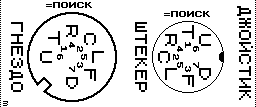
<style>
.page{position:relative;width:256px;height:107px;background:#ffffff}
.page>*{position:absolute;margin:0}
.t1{font:16px "ZX 6x8";color:#000000}
.t2{font:32px "zxSpectrumStrict";color:#000000}
</style>
<div class="page">
<p class="t1" style="left:237px;top:6px;width:16px;height:94px;rotate:90deg">ДЖОЙСТИК</p>
<p class="t1" style="left:9px;top:22px;width:14px;height:70px;rotate:90deg">ГНЕЗДО</p>
<p class="t2" style="left:66px;top:25px;width:12px;height:12px;rotate:90deg">R</p>
<p class="t1" style="left:135px;top:22px;width:12px;height:70px;rotate:90deg">ШТЕКЕР</p>
<p class="t2" style="left:182px;top:25px;width:12px;height:14px;rotate:90deg">T</p>
<p class="t2" style="left:48px;top:31px;width:12px;height:14px;rotate:90deg">T</p>
<p class="t2" style="left:84px;top:33px;width:12px;height:12px;rotate:90deg">C</p>
<p class="t2" style="left:165px;top:34px;width:12px;height:12px;rotate:90deg">R</p>
<p class="t2" style="left:199px;top:34px;width:12px;height:12px;rotate:90deg">U</p>
<p class="t2" style="left:40px;top:51px;width:12px;height:12px;rotate:90deg">U</p>
<p class="t2" style="left:92px;top:51px;width:12px;height:12px;rotate:90deg">L</p>
<p class="t2" style="left:158px;top:51px;width:12px;height:12px;rotate:90deg">C</p>
<p class="t2" style="left:66px;top:77px;width:12px;height:12px;rotate:90deg">D</p>
<p class="t2" style="left:84px;top:69px;width:12px;height:12px;rotate:90deg">F</p>
<p class="t2" style="left:165px;top:68px;width:12px;height:12px;rotate:90deg">L</p>
<p class="t2" style="left:182px;top:75px;width:12px;height:12px;rotate:90deg">F</p>
<p class="t2" style="left:199px;top:68px;width:12px;height:12px;rotate:90deg">D</p>
</div>
